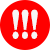
<style>
.page{position:relative;width:50px;height:50px;background:#ff0000}
.page>*{position:absolute;margin:0}
.t1{font:36px "BernardMT-Condensed";color:#f6f6f6}
</style>
<div class="page">
<p class="t1" style="left:12px;top:9px;width:26px;height:30px">!!!</p>
</div>
